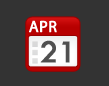
<style>
.page{position:relative;width:109px;height:86px;background:#333333}
.page>*{position:absolute;margin:0}
.t1{font:15.8px "MyriadPro-Regular";letter-spacing:0.015em;color:#ffffff;font-weight:bold}
.t2{font:33px "TwCenMT-Regular";color:#4f4f4f;font-weight:bold}
</style>
<div class="page">
<p class="t1" style="left:29px;top:20px;width:28px;height:13px">APR</p>
<p class="t2" style="left:40px;top:40px;width:30px;height:23px">21</p>
</div>
